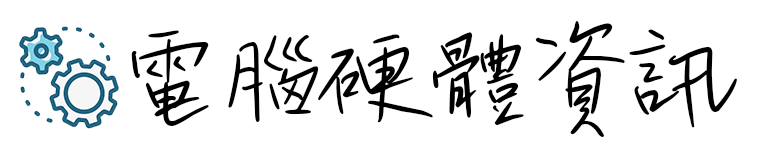
<style>
.page{position:relative;width:759px;height:154px;background:#ffffff}
.page>*{position:absolute;margin:0}
.t1{font:140px "HanyiSentyMeadow";color:#000000}
</style>
<div class="page">
<p class="t1" style="left:131px;top:21px;width:606px;height:116px">電腦硬體資訊</p>
</div>
